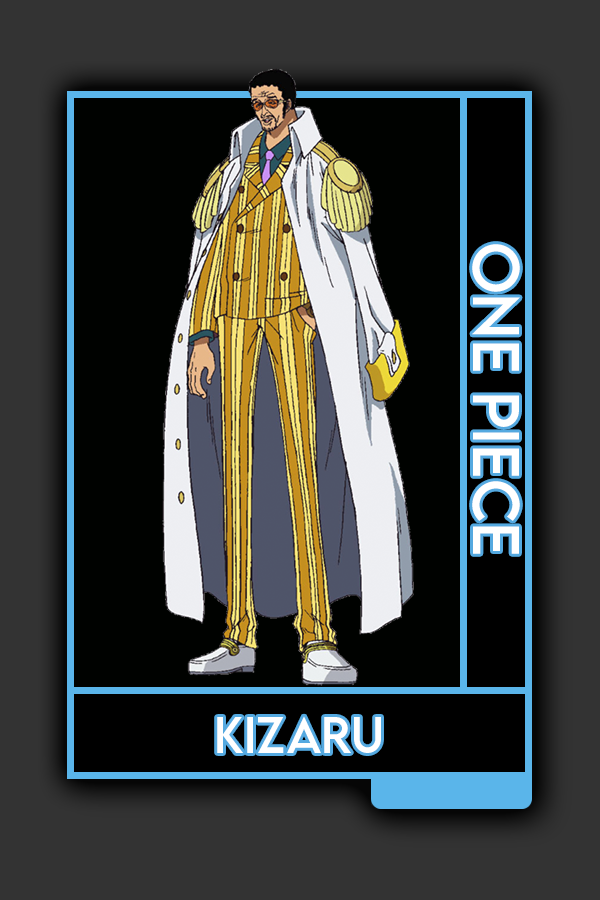
<style>
.page{position:relative;width:600px;height:900px;background:#333333}
.page>*{position:absolute;margin:0}
.t1{font:58.4px "LEMONMILK-Regular";color:#ffffff}
.t2{font:45.6px "LEMONMILK-Regular";color:#ffffff}
</style>
<div class="page">
<p class="t1" style="left:472px;top:244px;width:48px;height:310px;rotate:90deg">One Piece</p>
<p class="t2" style="left:217px;top:716px;width:164px;height:37px">Kizaru</p>
</div>
